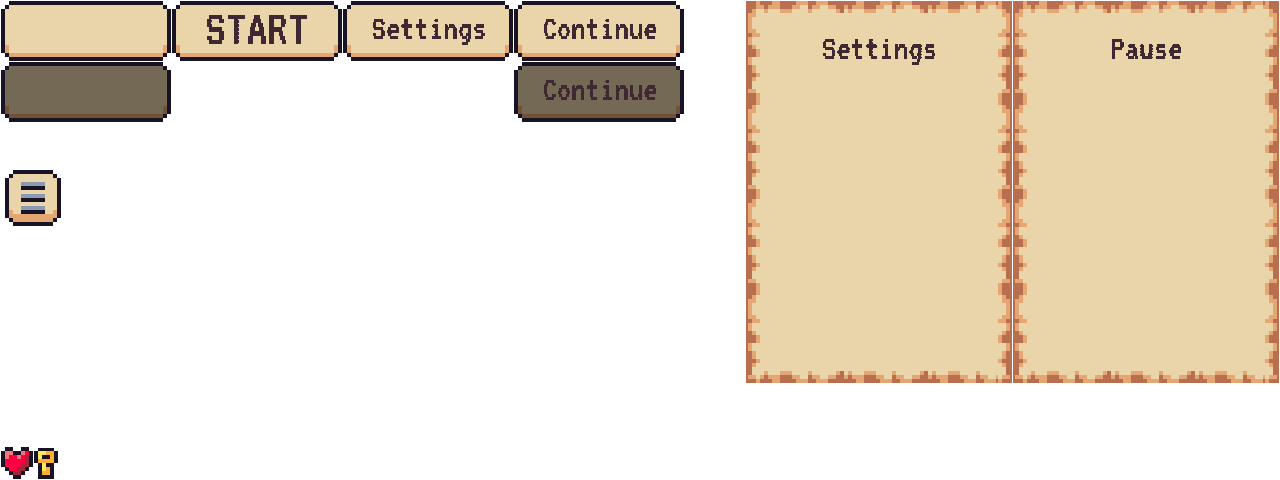
<style>
.page{position:relative;width:1280px;height:480px;background:#ffffff}
.page>*{position:absolute;margin:0}
.t1{font:52px "VT323-Regular";color:#3f2832}
.t2{font:36px "VT323-Regular";color:#3f2832}
</style>
<div class="page">
<p class="t1" style="left:206px;top:14px;width:102px;height:30px">START</p>
<p class="t2" style="left:372px;top:18px;width:113px;height:27px">Settings</p>
<p class="t2" style="left:543px;top:18px;width:114px;height:21px">Continue</p>
<p class="t2" style="left:823px;top:38px;width:113px;height:27px">Settings</p>
<p class="t2" style="left:1111px;top:38px;width:71px;height:21px">Pause</p>
<p class="t2" style="left:543px;top:79px;width:114px;height:21px">Continue</p>
</div>
